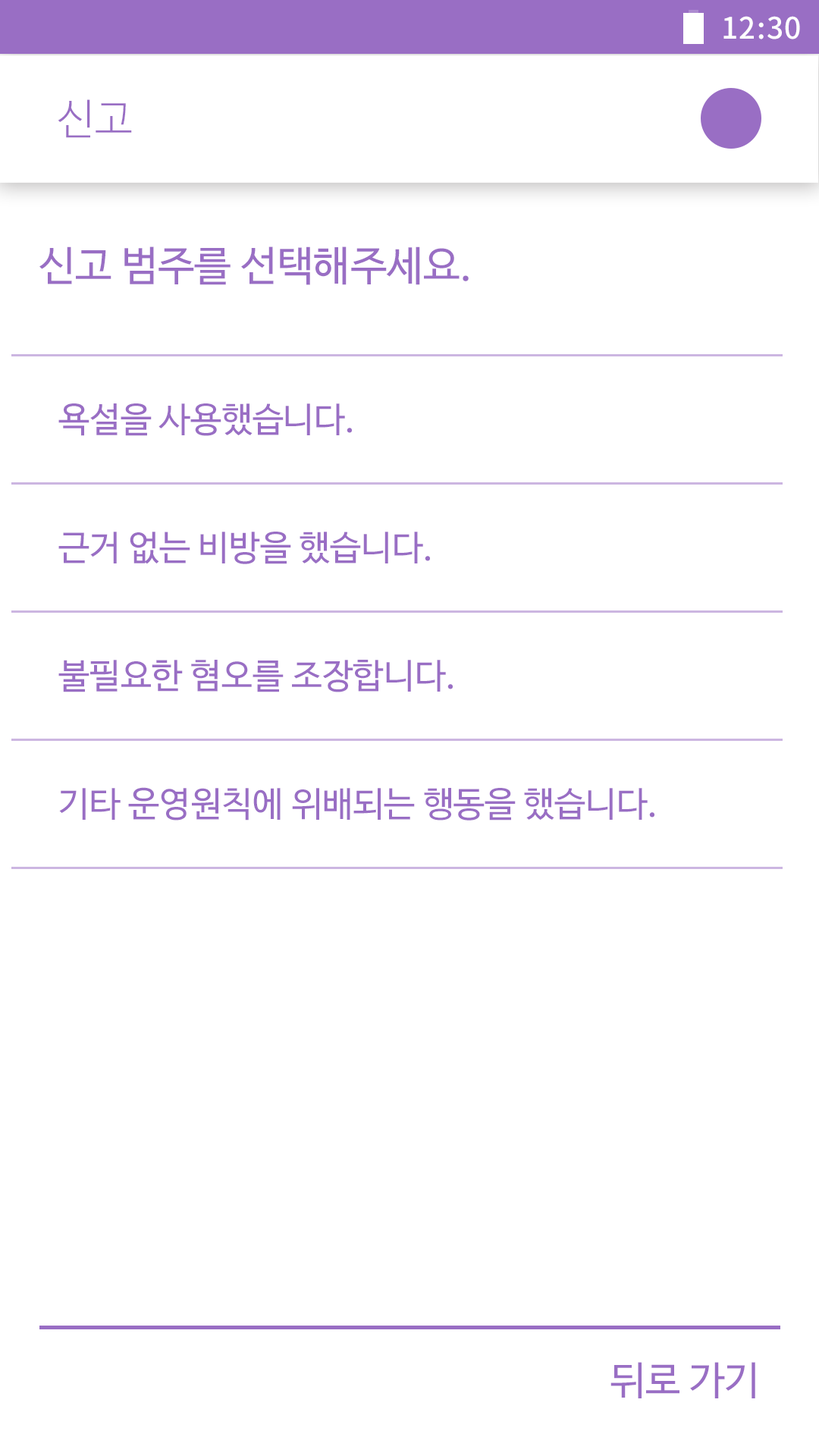
<style>
.page{position:relative;width:819px;height:1456px;background:#ffffff}
.page>*{position:absolute;margin:0}
.t1{font:29.6px "NotoSansCJKkr-Medium";letter-spacing:0.029em;color:#ffffff}
.t2{font:42.3px "NanumBarunGothicLight";color:#996ec4}
.t3{font:41.1px "NanumBarunGothic";color:#996ec4}
.t4{font:34.8px "NanumBarunGothic";color:#996ec4}
.t5{font:39.4px "NanumBarunGothic";color:#996ec4}
</style>
<div class="page">
<p class="t1" style="left:723px;top:16px;width:77px;height:23px">12:30</p>
<p class="t2" style="left:58px;top:99px;width:74px;height:39px">신고</p>
<p class="t3" style="left:39px;top:246px;width:430px;height:39px">신고 범주를 선택해주세요.</p>
<p class="t4" style="left:58px;top:403px;width:294px;height:33px">욕설을 사용했습니다.</p>
<p class="t4" style="left:58px;top:532px;width:372px;height:32px">근거 없는 비방을 했습니다.</p>
<p class="t4" style="left:58px;top:660px;width:395px;height:32px">불필요한 혐오를 조장합니다.</p>
<p class="t4" style="left:59px;top:787px;width:595px;height:34px">기타 운영원칙에 위배되는 행동을 했습니다.</p>
<p class="t5" style="left:610px;top:1362px;width:145px;height:36px">뒤로 가기</p>
</div>
